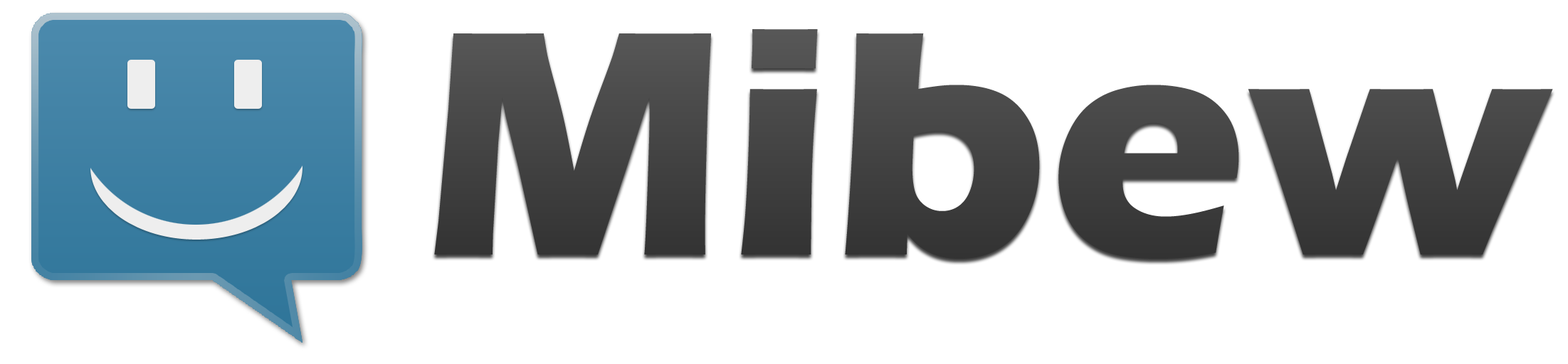
<style>
.page{position:relative;width:1568px;height:364px;background:#ffffff}
.page>*{position:absolute;margin:0}
.t1{font:332.2px "ErasITC-Bold";color:#333333}
</style>
<div class="page">
<p class="t1" style="left:434px;top:29px;width:1119px;height:230px">Mibew</p>
</div>
